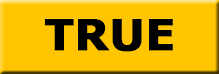
<style>
.page{position:relative;width:219px;height:74px;background:#ffc501}
.page>*{position:absolute;margin:0}
.t1{font:43px "Verdana-Bold";color:#000000;font-weight:bold}
</style>
<div class="page">
<p class="t1" style="left:44px;top:19px;width:129px;height:33px">TRUE</p>
</div>
